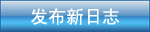
<style>
.page{position:relative;width:150px;height:32px}
.page>*{position:absolute;margin:0}
.t1{font:18px "SimHei";color:#fdfdfd}
</style>
<div class="page">
<p class="t1" style="left:31px;top:8px;width:89px;height:17px">发布新日志</p>
</div>
